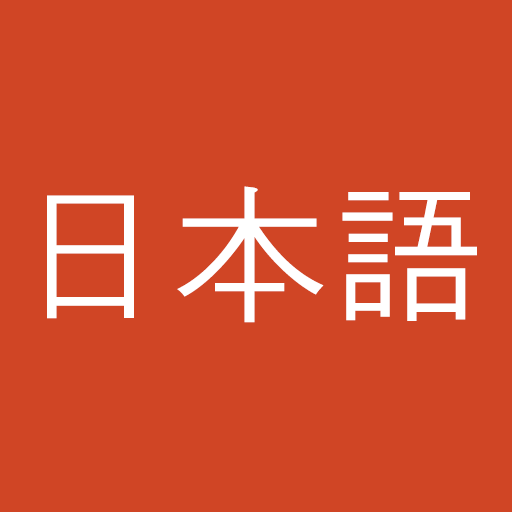
<style>
.page{position:relative;width:512px;height:512px;background:#d04525}
.page>*{position:absolute;margin:0}
.t1{font:160px "Gulim";color:#ffffff}
</style>
<div class="page">
<p class="t1" style="left:47px;top:186px;width:430px;height:137px">日本語</p>
</div>
